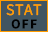
<style>
.page{position:relative;width:48px;height:32px;background:#415561}
.page>*{position:absolute;margin:0}
.t1{font:16px "SourceSansRoman-Regular";letter-spacing:0.08em;color:#ff9c00}
.t2{font:14px "SourceSansRoman-Bold";letter-spacing:0.08em;color:#000000}
</style>
<div class="page">
<p class="t1" style="left:6px;top:4px;width:36px;height:12px">STAT</p>
<p class="t2" style="left:11px;top:19px;width:26px;height:10px">OFF</p>
</div>
